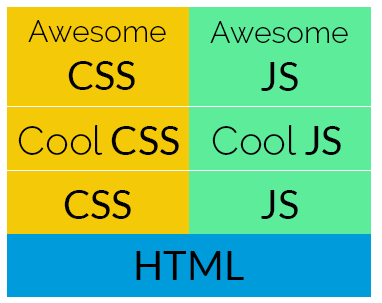
<style>
.page{position:relative;width:382px;height:303px;background:#f4ca08}
.page>*{position:absolute;margin:0}
.t1{font:30px "Raleway-Light";color:#000000}
.t2{font:40px "Lato-Regular";color:#000000}
.t3{font:40px "Raleway-Light";color:#000000}
</style>
<div class="page">
<p class="t1" style="left:28px;top:20px;width:138px;height:70px;text-align:center"><span class="t2"><br></span>Awesome<br><span class="t2"> CSS</span></p>
<p class="t1" style="left:210px;top:21px;width:138px;height:70px;text-align:center"><span class="t2"><br></span>Awesome<br><span class="t2">JS</span></p>
<p class="t3" style="left:18px;top:125px;width:161px;height:30px"><span class="t2"><br></span>Cool<span class="t2"> CSS</span></p>
<p class="t3" style="left:212px;top:125px;width:129px;height:30px"><span class="t2"><br></span>Cool<span class="t2"> JS</span></p>
<p class="t2" style="left:64px;top:190px;width:67px;height:29px">CSS</p>
<p class="t2" style="left:261px;top:190px;width:37px;height:29px">JS</p>
<p class="t2" style="left:136px;top:251px;width:108px;height:29px">HTML</p>
</div>
